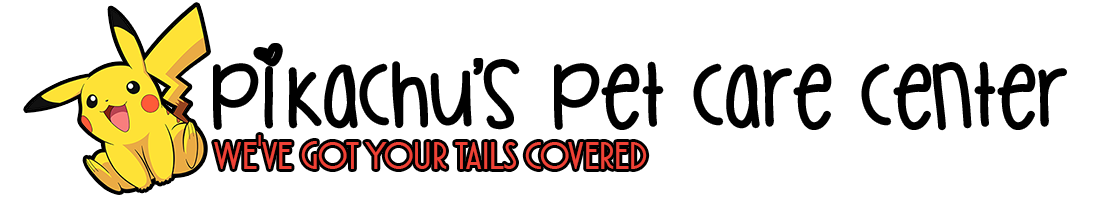
<style>
.page{position:relative;width:1100px;height:200px;background:#ffffff}
.page>*{position:absolute;margin:0}
.t1{font:96px "MulticoloredButterflies";color:#000000}
.t2{font:96px "AtlanticCruise";color:#000000}
.t3{font:48px "AtlanticCruise";color:#ef4135}
</style>
<div class="page">
<p class="t1" style="left:215px;top:45px;width:850px;height:84px">pikachu<span class="t2">’</span>s pet care center</p>
<p class="t3" style="left:214px;top:135px;width:433px;height:34px">we've got your tails covered</p>
</div>
